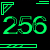
<style>
.page{position:relative;width:50px;height:50px;background:#000000}
.page>*{position:absolute;margin:0}
.t1{font:20.8px "ABitEmpty";color:#00ff66}
</style>
<div class="page">
<p class="t1" style="left:3px;top:16px;width:44px;height:18px">256</p>
</div>
